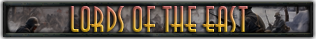
<style>
.page{position:relative;width:316px;height:39px}
.page>*{position:absolute;margin:0}
.t1{font:36px "AnnaITCTT"}
</style>
<div class="page">
<p class="t1" style="left:70px;top:6px;width:178px;height:26px">LORDS OF THE EAST</p>
</div>
